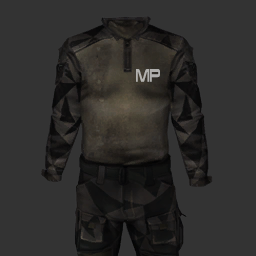
<style>
.page{position:relative;width:256px;height:256px;background:#333333}
.page>*{position:absolute;margin:0}
.t1{font:15.9px "MassEffect123";color:#b0aead;text-transform:uppercase;scale:0.57 1}
</style>
<div class="page">
<p class="t1" style="left:136px;top:69px;width:24px;height:13px">MP</p>
</div>
